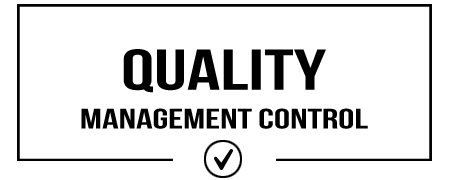
<style>
.page{position:relative;width:450px;height:180px;background:#ffffff}
.page>*{position:absolute;margin:0}
.t1{font:57.6px "BebasNeue";color:#000000;scale:1.44 1}
.t2{font:28.3px "BebasNeue";color:#000000;scale:1.44 1}
</style>
<div class="page">
<p class="t1" style="left:123px;top:49px;width:203px;height:44px">QUALITY</p>
<p class="t2" style="left:81px;top:108px;width:287px;height:21px">management control</p>
</div>
